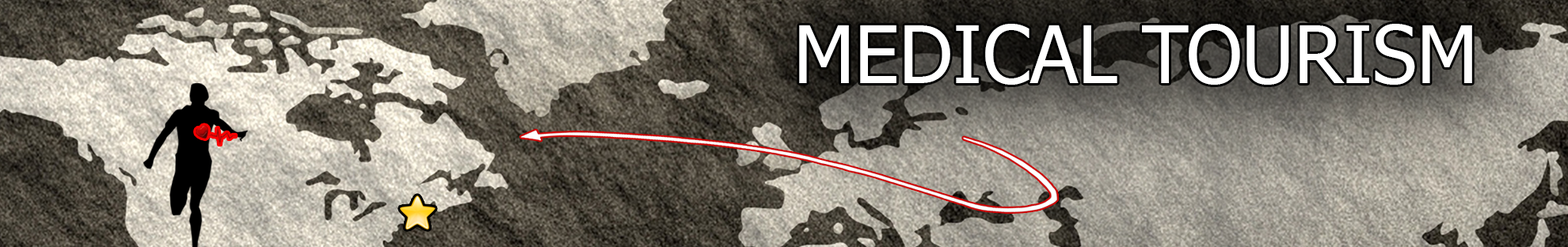
<style>
.page{position:relative;width:1568px;height:247px}
.page>*{position:absolute;margin:0}
.t1{font:79.2px "Tahoma";color:#ffffff}
</style>
<div class="page">
<p class="t1" style="left:799px;top:24px;width:673px;height:61px">MEDICAL TOURISM</p>
</div>
